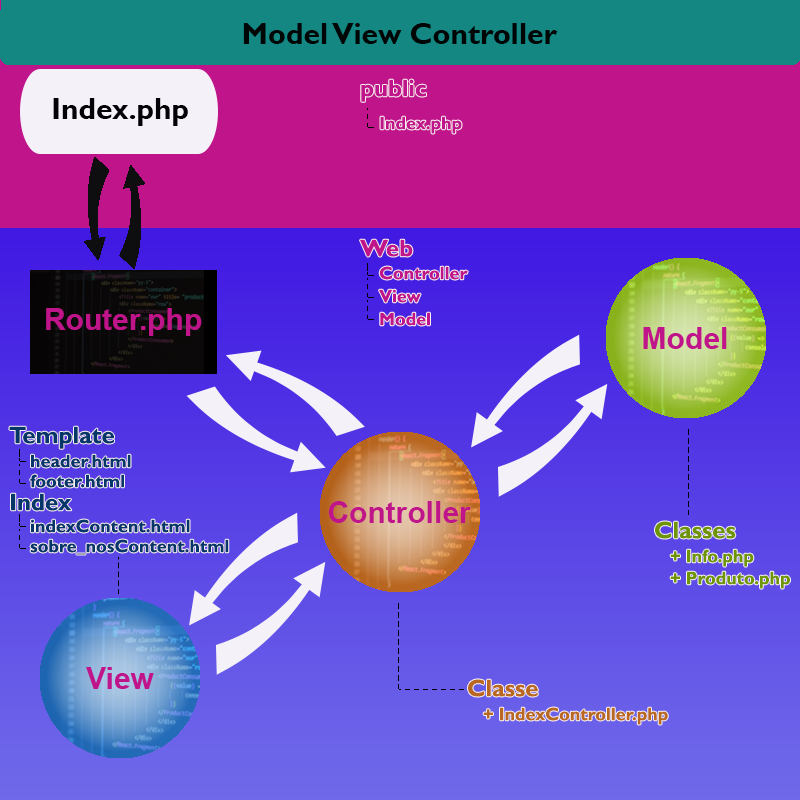
<style>
.page{position:relative;width:800px;height:800px}
.page>*{position:absolute;margin:0}
.t1{font:30px "GillSansMT-Bold";color:#000505}
.t2{font:30px "GillSansMT-Bold";color:#030006}
.t3{font:24px "GillSansMT-Bold";color:#c0148a}
.t4{font:18px "GillSansMT-Bold";color:#c0148a}
.t5{font:30px "Arial-BoldMT";color:#c0148a}
.t6{font:24px "GillSansMT-Bold";color:#05366a}
.t7{font:18px "GillSansMT-Bold";color:#05366a}
.t8{font:24px "GillSansMT-Bold";color:#6e9506}
.t9{font:18px "GillSansMT-Bold";color:#6e9506}
.t10{font:24px "GillSansMT-Bold";color:#b96721}
.t11{font:18px "GillSansMT-Bold";color:#b96721}
</style>
<div class="page">
<p class="t1" style="left:243px;top:23px;width:315px;height:21px">Model View Controller</p>
<p class="t2" style="left:53px;top:98px;width:135px;height:28px">Index.php</p>
<p class="t3" style="left:360px;top:239px;width:53px;height:18px">Web</p>
<p class="t4" style="left:379px;top:266px;width:89px;height:14px">Controller</p>
<p class="t4" style="left:379px;top:289px;width:42px;height:14px">View</p>
<p class="t5" style="left:46px;top:308px;width:156px;height:28px">Router.php</p>
<p class="t4" style="left:380px;top:312px;width:50px;height:14px">Model</p>
<p class="t6" style="left:9px;top:426px;width:105px;height:23px">Template</p>
<p class="t7" style="left:31px;top:454px;width:100px;height:14px">header.html</p>
<p class="t7" style="left:30px;top:474px;width:94px;height:14px">footer.html</p>
<p class="t6" style="left:11px;top:493px;width:61px;height:18px">Index</p>
<p class="t5" style="left:328px;top:501px;width:143px;height:22px">Controller</p>
<p class="t7" style="left:31px;top:519px;width:159px;height:14px">indexContent.html</p>
<p class="t8" style="left:655px;top:521px;width:81px;height:18px">Classes</p>
<p class="t7" style="left:30px;top:539px;width:199px;height:16px">sobre_nosContent.html</p>
<p class="t9" style="left:670px;top:549px;width:84px;height:18px">+ Info.php</p>
<p class="t9" style="left:670px;top:571px;width:120px;height:18px">+ Produto.php</p>
<p class="t10" style="left:468px;top:679px;width:70px;height:18px">Classe</p>
<p class="t11" style="left:483px;top:707px;width:185px;height:18px">+ IndexController.php</p>
</div>
